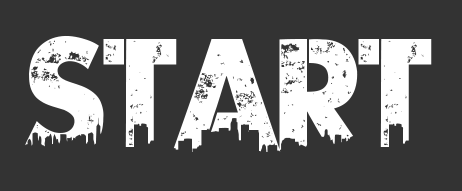
<style>
.page{position:relative;width:462px;height:191px;background:#333333}
.page>*{position:absolute;margin:0}
.t1{font:150px "UrbanJungleDEMO";color:#ffffff}
</style>
<div class="page">
<p class="t1" style="left:25px;top:35px;width:407px;height:117px">Start</p>
</div>
